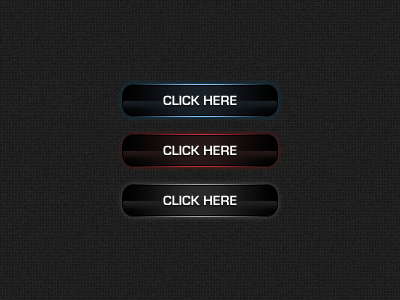
<style>
.page{position:relative;width:400px;height:300px}
.page>*{position:absolute;margin:0}
.t1{font:14px "EurostileBold";color:#ffffff}
</style>
<div class="page">
<p class="t1" style="left:163px;top:95px;width:74px;height:10px">CLICK HERE</p>
<p class="t1" style="left:163px;top:145px;width:74px;height:10px">CLICK HERE</p>
<p class="t1" style="left:163px;top:195px;width:74px;height:10px">CLICK HERE</p>
</div>
